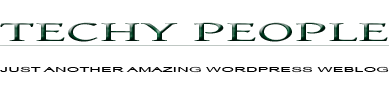
<style>
.page{position:relative;width:389px;height:90px;background:#ffffff}
.page>*{position:absolute;margin:0}
.t1{font:29px "Gentium";text-decoration:underline;scale:2.18 1}
.t2{font:7px "ArialMT";color:#000000;scale:2.33 1}
</style>
<div class="page">
<p class="t1" style="left:0px;top:22px;width:390px;height:24px">TECHY PEOPLE</p>
<p class="t2" style="left:0px;top:66px;width:389px;height:7px">JUST ANOTHER AMAZING WORDPRESS WEBLOG</p>
</div>
